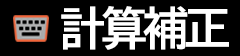
<style>
.page{position:relative;width:240px;height:56px;background:#000000}
.page>*{position:absolute;margin:0}
.t1{font:44.8px "BIZ-UDPGothic-Bold";letter-spacing:-0.075em;color:#ffffff}
</style>
<div class="page">
<p class="t1" style="left:61px;top:6px;width:168px;height:44px">計算補正</p>
</div>
